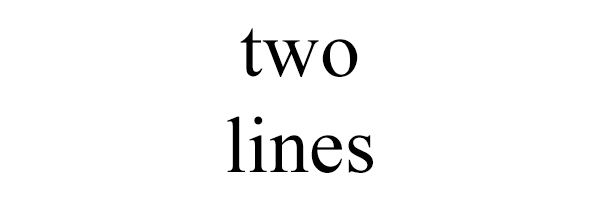
<style>
.page{position:relative;width:600px;height:200px;background:#ffffff}
.page>*{position:absolute;margin:0}
.t1{font:80px "TimesNewRomanPSMT";color:#000000}
</style>
<div class="page">
<p class="t1" style="left:227px;top:28px;width:146px;height:145px;text-align:center">two<br>lines</p>
</div>
